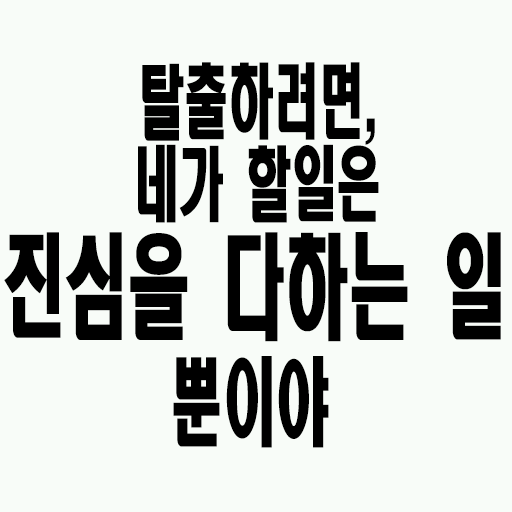
<style>
.page{position:relative;width:512px;height:512px;background:#f8fcf8}
.page>*{position:absolute;margin:0}
.t1{font:81px "HeadlineR-HM";color:#000000;scale:0.56 1}
.t2{font:113.4px "HeadlineR-HM";color:#000000;scale:0.56 1}
.t3{font:95.4px "HeadlineR-HM";color:#000000;scale:0.56 1}
</style>
<div class="page">
<p class="t1" style="left:142px;top:62px;width:233px;height:83px">탈출하려면,</p>
<p class="t1" style="left:138px;top:144px;width:241px;height:79px">네가 할일은</p>
<p class="t2" style="left:4px;top:232px;width:497px;height:110px">진심을 다하는 일</p>
<p class="t3" style="left:173px;top:356px;width:156px;height:92px">뿐이야</p>
</div>
